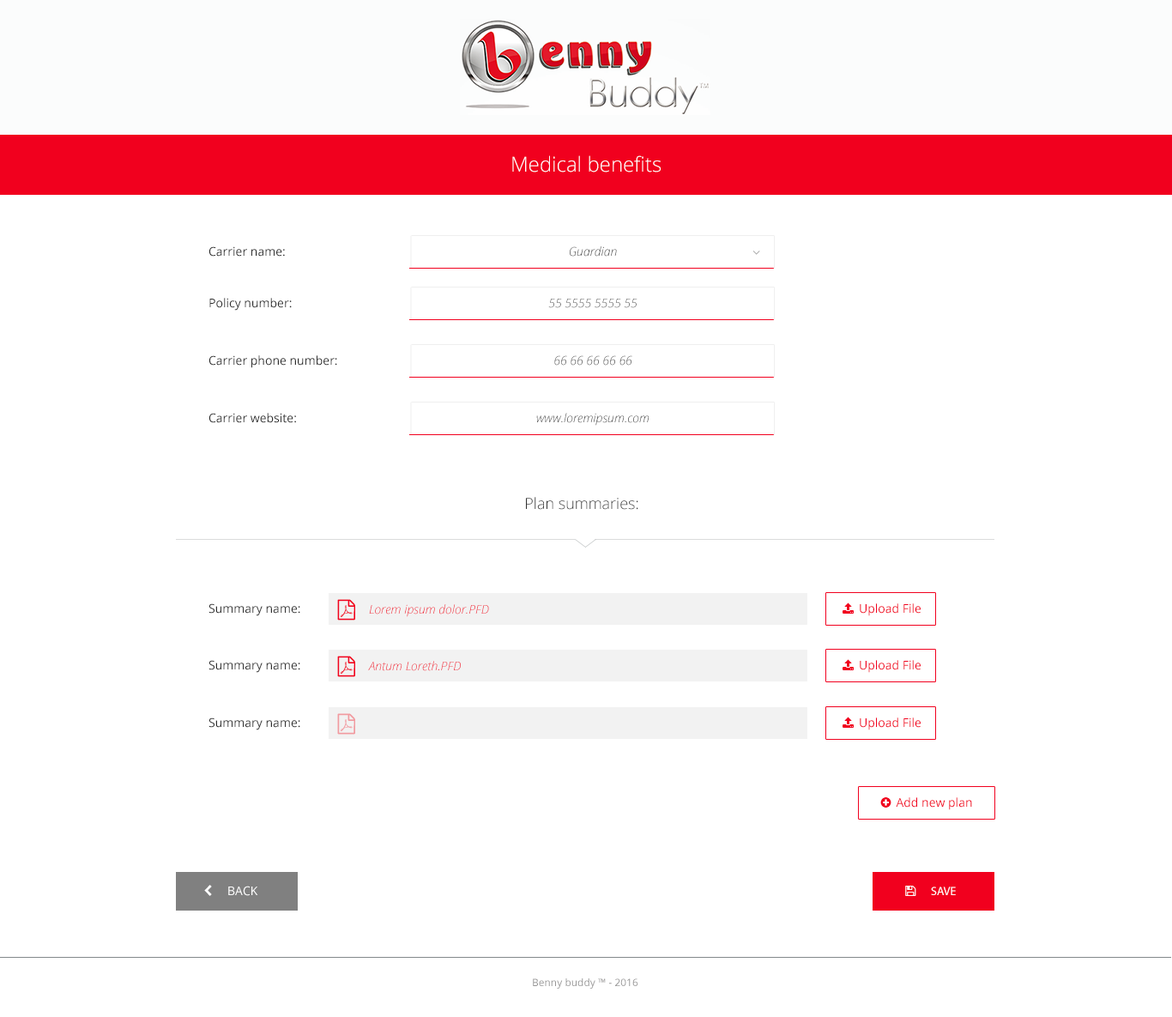
<style>
.page{position:relative;width:1172px;height:1017px;background:#ffffff}
.page>*{position:absolute;margin:0}
.t1{font:20.6px "OpenSans-Light";color:#ffffff}
.t2{font:12px "OpenSans";color:#2e2e2e}
.t3{font:12px "OpenSansLight-Italic";color:#2e2e2e}
.t4{font:12px "OpenSansLight-Italic"}
.t5{font:15.4px "OpenSans-Light";color:#2e2e2e}
.t6{font:10.3px "OpenSans";color:#979696}
</style>
<div class="page">
<p class="t1" style="left:512px;top:155px;width:149px;height:18px">Medical benefits</p>
<p class="t2" style="left:209px;top:246px;width:76px;height:11px">Carrier name:</p>
<p class="t3" style="left:570px;top:246px;width:47px;height:11px">Guardian</p>
<p class="t2" style="left:209px;top:298px;width:83px;height:13px">Policy number:</p>
<p class="t4" style="left:548px;top:299px;width:90px;height:9px">55 5555 5555 55</p>
<p class="t2" style="left:209px;top:355px;width:128px;height:13px">Carrier phone number:</p>
<p class="t4" style="left:554px;top:355px;width:79px;height:11px">66 66 66 66 66</p>
<p class="t2" style="left:209px;top:413px;width:87px;height:10px">Carrier website:</p>
<p class="t4" style="left:536px;top:413px;width:114px;height:13px">www.loremipsum.com</p>
<p class="t5" style="left:526px;top:497px;width:113px;height:13px">Plan summaries:</p>
<p class="t2" style="left:209px;top:603px;width:91px;height:13px">Summary name:</p>
<p class="t4" style="left:369px;top:604px;width:120px;height:13px">Lorem ipsum dolor.PFD</p>
<p class="t2" style="left:209px;top:660px;width:91px;height:13px">Summary name:</p>
<p class="t4" style="left:368px;top:661px;width:93px;height:10px">Antum Loreth.PFD</p>
<p class="t2" style="left:209px;top:718px;width:91px;height:12px">Summary name:</p>
<p class="t6" style="left:533px;top:978px;width:106px;height:11px">Benny buddy ™ - 2016</p>
</div>
